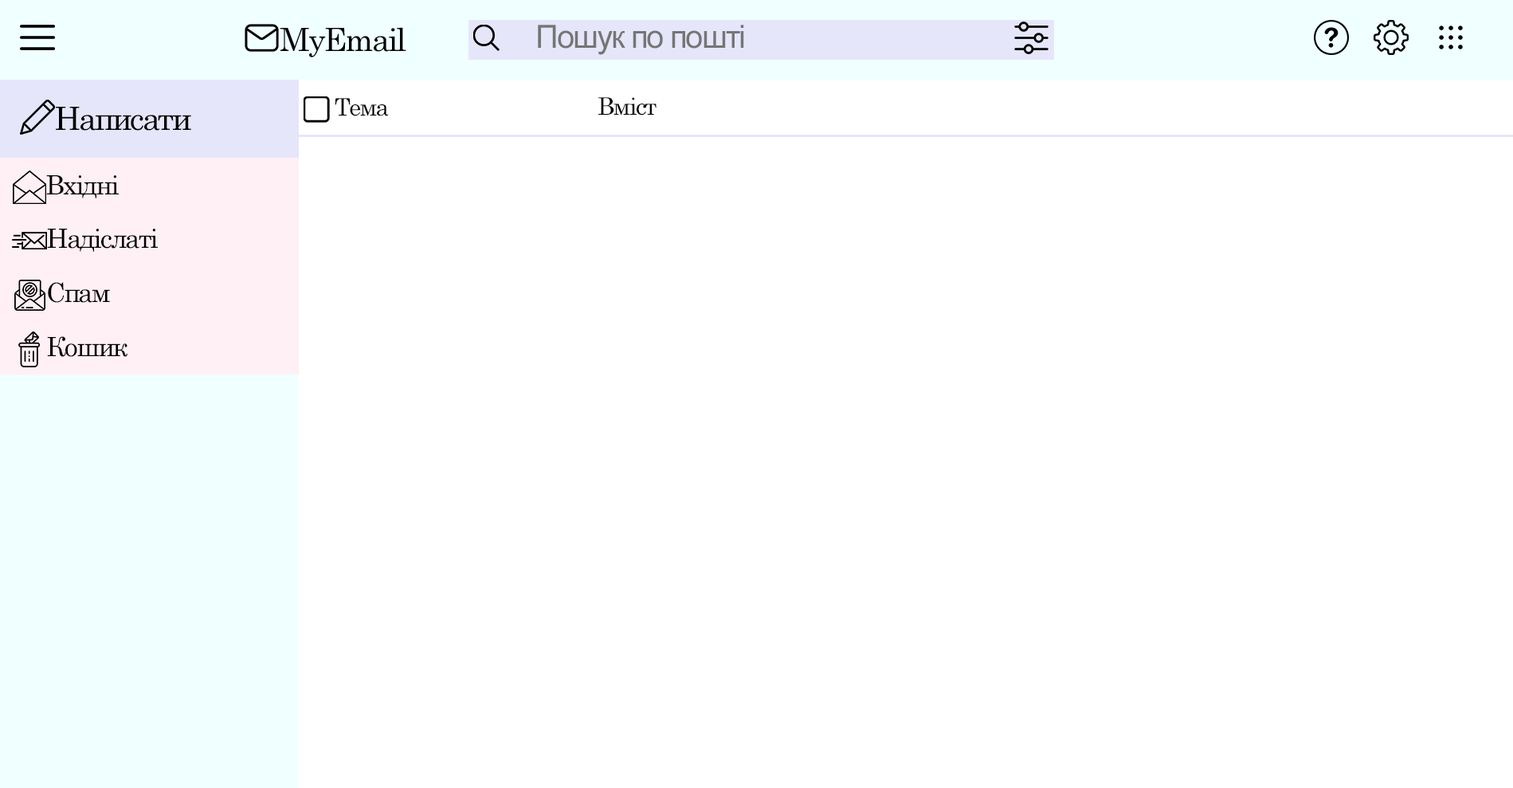
<style>
.page{position:relative;width:1513px;height:788px;background:#ffffff}
.page>*{position:absolute;margin:0}
.t1{font:31.9px "Century";letter-spacing:-0.05em;color:#000000}
.t2{font:31.9px "ArialMT";letter-spacing:-0.05em;color:#757575}
.t3{font:23.9px "Century";letter-spacing:-0.05em;color:#000000}
.t4{font:31.9px "Century";letter-spacing:-0.06em;color:#000000}
.t5{font:26.6px "Century";letter-spacing:-0.06em;color:#000000}
</style>
<div class="page">
<p class="t1" style="left:280px;top:27px;width:126px;height:30px">MyEmail</p>
<p class="t2" style="left:538px;top:25px;width:206px;height:30px">Пошук по пошті</p>
<p class="t3" style="left:335px;top:98px;width:54px;height:18px">Тема</p>
<p class="t3" style="left:598px;top:97px;width:59px;height:19px">Вміст</p>
<p class="t4" style="left:56px;top:107px;width:135px;height:24px">Написати</p>
<p class="t5" style="left:46px;top:175px;width:73px;height:23px">Вхідні</p>
<p class="t5" style="left:47px;top:229px;width:111px;height:23px">Надіслаті</p>
<p class="t5" style="left:48px;top:282px;width:62px;height:21px">Спам</p>
<p class="t5" style="left:47px;top:336px;width:80px;height:21px">Кошик</p>
</div>
